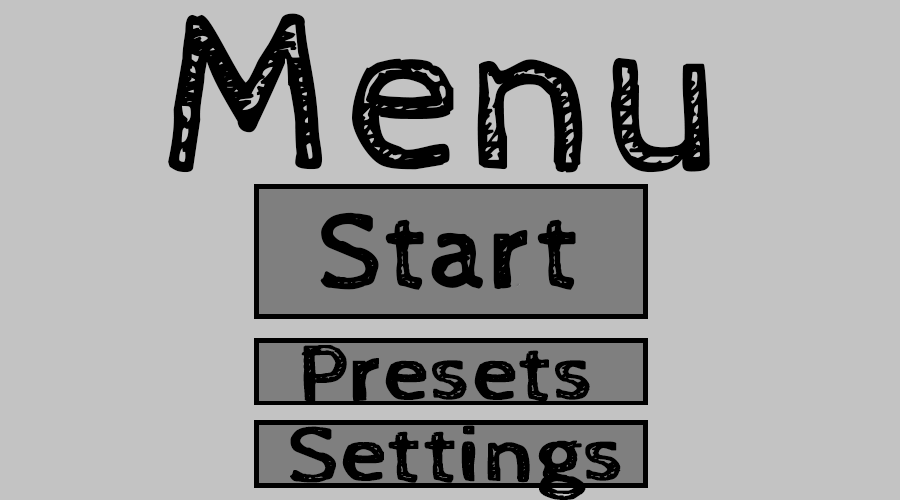
<style>
.page{position:relative;width:900px;height:500px;background:#c3c3c3}
.page>*{position:absolute;margin:0}
.t1{font:228.9px "CabinSketch-Regular";color:#000000;font-weight:bold}
.t2{font:108.6px "CabinSketch-Regular";color:#000000;font-weight:bold;scale:1.05 1}
.t3{font:81.1px "CabinSketch-Regular";color:#000000;font-weight:bold;scale:1.08 1}
.t4{font:80.7px "CabinSketch-Regular";color:#000000;font-weight:bold;scale:1.11 1}
</style>
<div class="page">
<p class="t1" style="left:168px;top:13px;width:542px;height:160px">Menu</p>
<p class="t2" style="left:320px;top:212px;width:256px;height:78px">Start</p>
<p class="t3" style="left:301px;top:345px;width:289px;height:57px">Presets</p>
<p class="t4" style="left:290px;top:425px;width:331px;height:75px">Settings</p>
</div>
